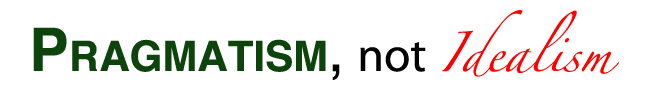
<style>
.page{position:relative;width:646px;height:100px;background:#ffffff}
.page>*{position:absolute;margin:0}
.t1{font:60px "Helvetica-Bold";color:#0d440c;font-variant:small-caps}
.t2{font:60px "Helvetica";color:#000000}
.t3{font:48px "MyriadPro-Regular";color:#000000}
.t4{font:36px "Zapfino";color:#fe0000}
</style>
<div class="page">
<p class="t1" style="left:33px;top:10px;width:586px;height:70px">Pragmatism<span class="t2">, </span><span class="t3">not </span><span class="t4">Idealism</span></p>
</div>
